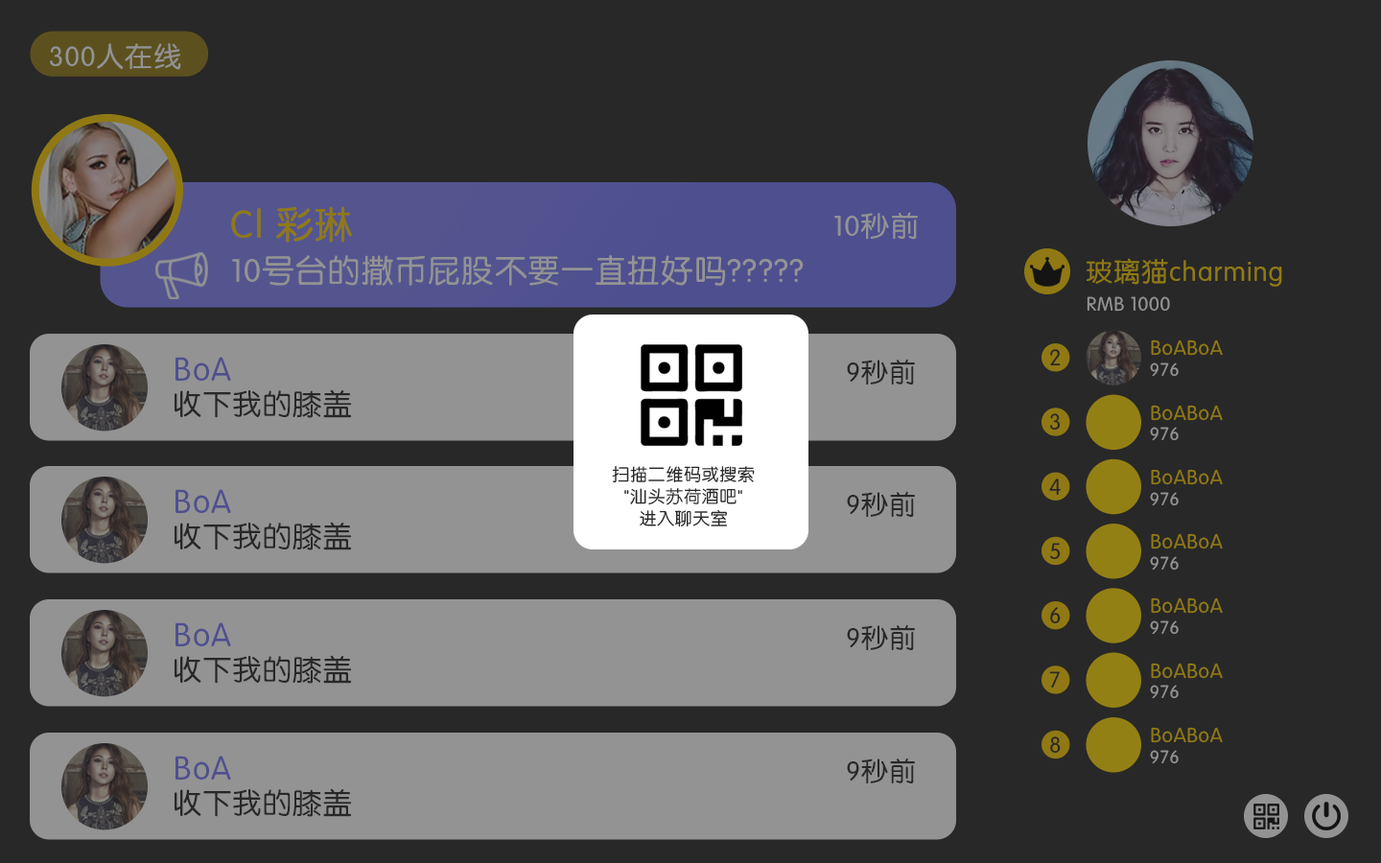
<style>
.page{position:relative;width:1381px;height:863px;background:#282828}
.page>*{position:absolute;margin:0}
.t1{font:27.5px "FZY3JW--GB1-0";letter-spacing:0.04em;color:#939393}
.t2{font:38.4px "FZY3JW--GB1-0";letter-spacing:0.04em;color:#907914}
.t3{font:28.3px "FZY3JW--GB1-0";letter-spacing:0.04em;color:#939393}
.t4{font:32.1px "FZY3JW--GB1-0";letter-spacing:0.04em;color:#939393}
.t5{font:26.9px "FZY3JW--GB1-0";letter-spacing:0.04em;color:#907914}
.t6{font:19.2px "FZY3JW--GB1-0";letter-spacing:0.04em;color:#939393}
.t7{font:20.2px "FZY3JW--GB1-0";letter-spacing:0.04em;color:#907914}
.t8{font:22.2px "FZY3JW--GB1-0";letter-spacing:0.04em;color:#282828}
.t9{font:32.7px "FZY3JW--GB1-0";letter-spacing:0.04em;color:#4f4f8f}
.t10{font:27px "FZY3JW--GB1-0";letter-spacing:0.04em;color:#282828}
.t11{font:17.9px "FZY3JW--GB1-0";letter-spacing:0.04em;color:#939393}
.t12{font:28.9px "FZY3JW--GB1-0";letter-spacing:0.04em;color:#282828}
.t13{font:17.3px/22.1px "FZY3JW--GB1-0";letter-spacing:0.04em;color:#282828}
</style>
<div class="page">
<p class="t1" style="left:50px;top:43px;width:131px;height:27px">300人在线</p>
<p class="t2" style="left:231px;top:206px;width:121px;height:37px">Cl 彩琳</p>
<p class="t3" style="left:835px;top:212px;width:83px;height:28px">10秒前</p>
<p class="t4" style="left:232px;top:255px;width:572px;height:31px">10号台的撒币屁股不要一直扭好吗?????</p>
<p class="t5" style="left:1087px;top:258px;width:195px;height:29px">玻璃猫charming</p>
<p class="t6" style="left:1087px;top:296px;width:83px;height:16px">RMB 1000</p>
<p class="t7" style="left:1151px;top:340px;width:72px;height:16px">BoABoA</p>
<p class="t8" style="left:1050px;top:349px;width:11px;height:17px">2</p>
<p class="t9" style="left:176px;top:357px;width:55px;height:24px">BoA</p>
<p class="t10" style="left:847px;top:359px;width:68px;height:26px">9秒前</p>
<p class="t11" style="left:1150px;top:363px;width:29px;height:14px">976</p>
<p class="t12" style="left:175px;top:389px;width:177px;height:29px">收下我的膝盖</p>
<p class="t8" style="left:1049px;top:413px;width:12px;height:18px">3</p>
<p class="t7" style="left:1151px;top:405px;width:72px;height:16px">BoABoA</p>
<p class="t11" style="left:1150px;top:427px;width:29px;height:14px">976</p>
<p class="t13" style="left:612px;top:466px;width:143px;height:62px;text-align:center">扫描二维码或搜索<br>"汕头苏荷酒吧"<br>进入聊天室</p>
<p class="t7" style="left:1151px;top:469px;width:72px;height:16px">BoABoA</p>
<p class="t8" style="left:1049px;top:479px;width:12px;height:16px">4</p>
<p class="t9" style="left:176px;top:489px;width:55px;height:24px">BoA</p>
<p class="t10" style="left:847px;top:491px;width:68px;height:26px">9秒前</p>
<p class="t11" style="left:1150px;top:492px;width:29px;height:14px">976</p>
<p class="t12" style="left:175px;top:522px;width:177px;height:29px">收下我的膝盖</p>
<p class="t7" style="left:1151px;top:533px;width:72px;height:17px">BoABoA</p>
<p class="t8" style="left:1050px;top:543px;width:11px;height:17px">5</p>
<p class="t11" style="left:1150px;top:556px;width:29px;height:15px">976</p>
<p class="t7" style="left:1151px;top:598px;width:72px;height:16px">BoABoA</p>
<p class="t8" style="left:1050px;top:607px;width:11px;height:17px">6</p>
<p class="t9" style="left:176px;top:623px;width:55px;height:24px">BoA</p>
<p class="t10" style="left:847px;top:624px;width:68px;height:26px">9秒前</p>
<p class="t11" style="left:1150px;top:621px;width:29px;height:14px">976</p>
<p class="t12" style="left:175px;top:655px;width:177px;height:29px">收下我的膝盖</p>
<p class="t7" style="left:1151px;top:663px;width:72px;height:16px">BoABoA</p>
<p class="t8" style="left:1049px;top:671px;width:11px;height:17px">7</p>
<p class="t11" style="left:1150px;top:685px;width:29px;height:14px">976</p>
<p class="t8" style="left:1050px;top:737px;width:11px;height:17px">8</p>
<p class="t7" style="left:1151px;top:727px;width:72px;height:16px">BoABoA</p>
<p class="t9" style="left:176px;top:756px;width:55px;height:24px">BoA</p>
<p class="t10" style="left:847px;top:758px;width:68px;height:26px">9秒前</p>
<p class="t11" style="left:1150px;top:750px;width:29px;height:14px">976</p>
<p class="t12" style="left:175px;top:788px;width:177px;height:29px">收下我的膝盖</p>
</div>
